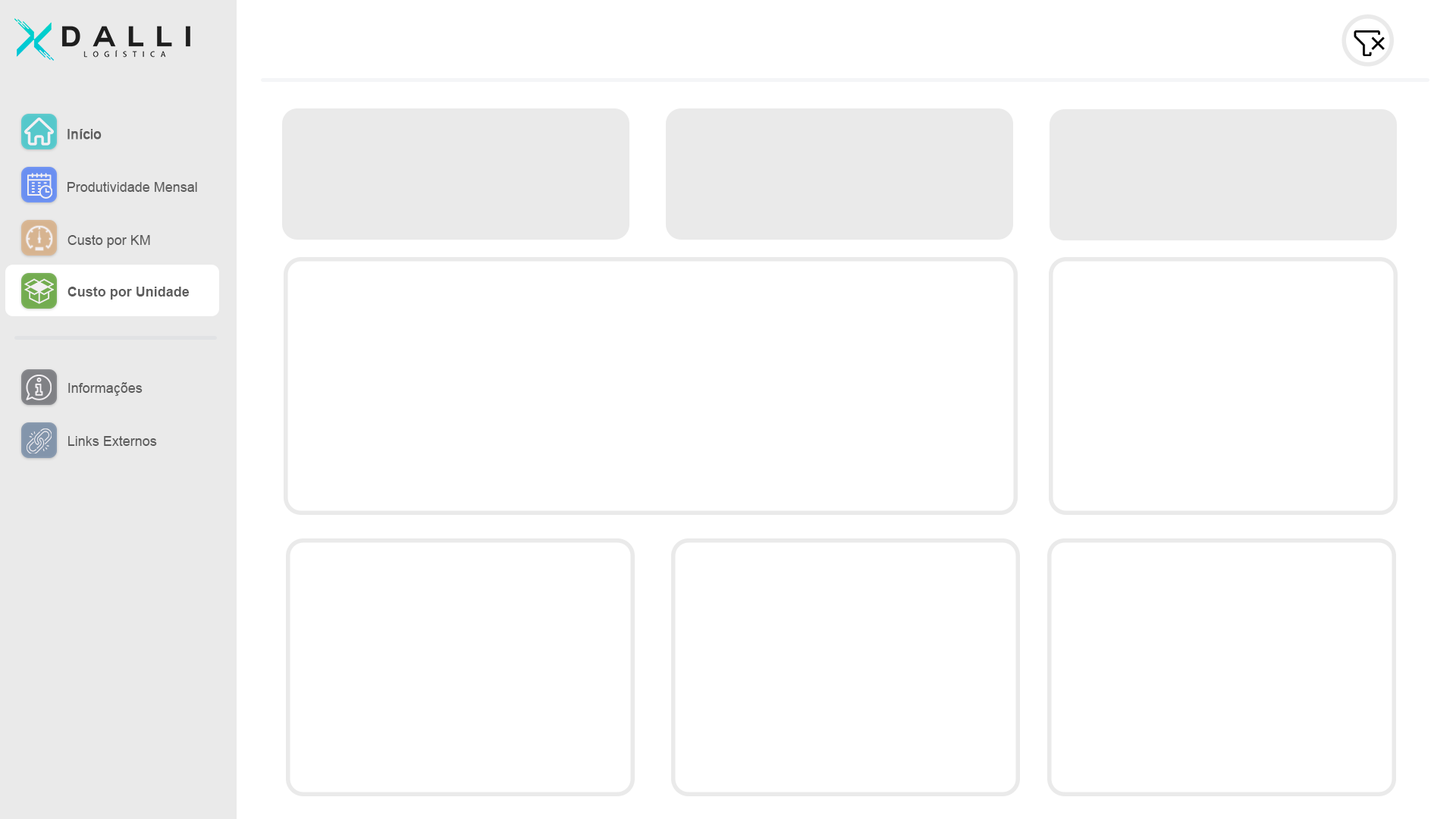
<style>
.page{position:relative;width:1456px;height:819px;background:#ffffff}
.page>*{position:absolute;margin:0}
.t1{font:13.6px "ArialMT";color:#5d5d5d;font-weight:bold}
.t2{font:13.6px "ArialMT";color:#5d5d5d}
.t3{font:13.6px "Arial-BoldMT";color:#5d5d5d}
</style>
<div class="page">
<p class="t1" style="left:67px;top:129px;width:35px;height:11px">Início</p>
<p class="t2" style="left:67px;top:182px;width:130px;height:10px">Produtividade Mensal</p>
<p class="t2" style="left:67px;top:235px;width:83px;height:13px">Custo por KM</p>
<p class="t3" style="left:67px;top:287px;width:123px;height:13px">Custo por Unidade</p>
<p class="t2" style="left:68px;top:382px;width:75px;height:14px">Informações</p>
<p class="t2" style="left:68px;top:436px;width:89px;height:10px">Links Externos</p>
</div>
